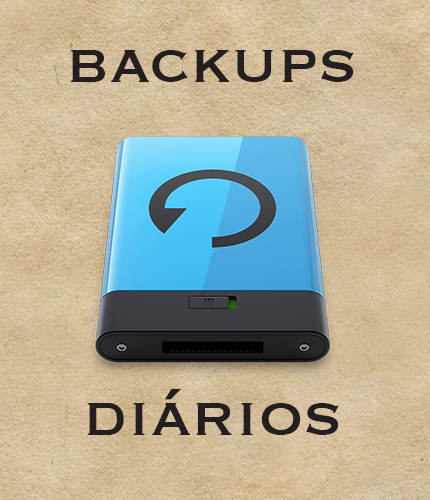
<style>
.page{position:relative;width:430px;height:500px}
.page>*{position:absolute;margin:0}
.t1{font:72px "Copperplate";color:#231f20}
</style>
<div class="page">
<p class="t1" style="left:71px;top:50px;width:283px;height:32px">backups</p>
<p class="t1" style="left:87px;top:389px;width:252px;height:46px">diários</p>
</div>
